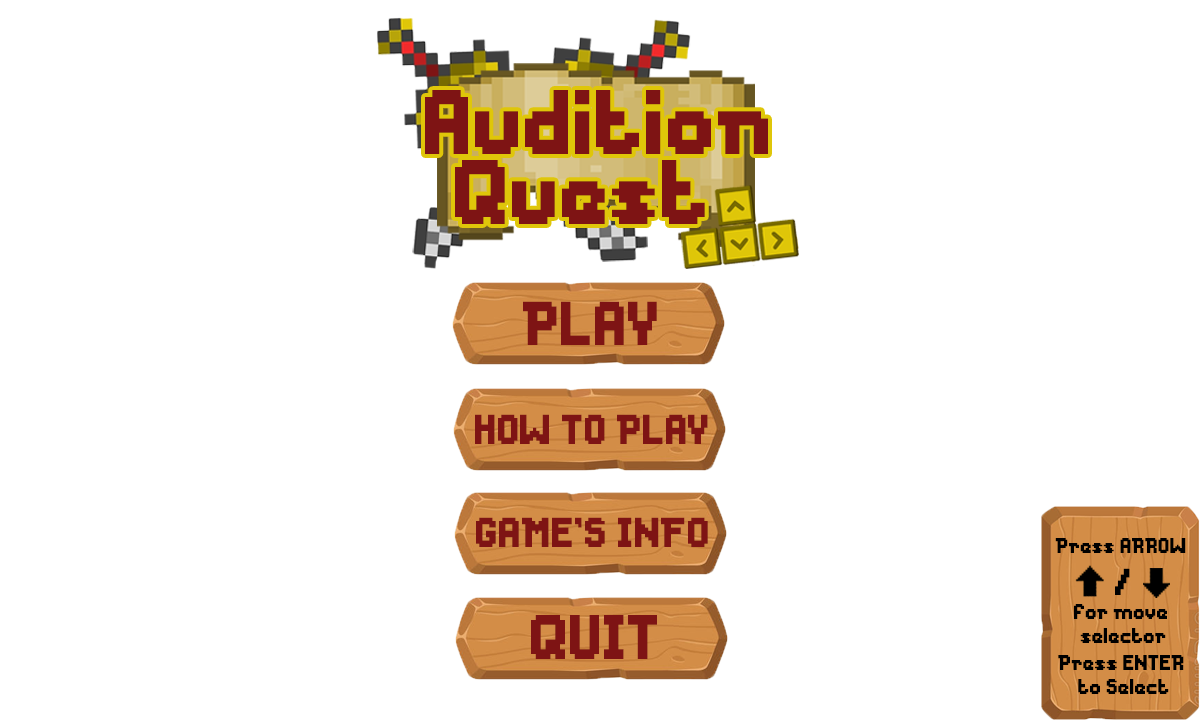
<style>
.page{position:relative;width:1200px;height:720px;background:#ffffff}
.page>*{position:absolute;margin:0}
.t1{font:85.4px "Messe-Duesseldorf";color:#7e1414}
.t2{font:57.8px "Messe-Duesseldorf";color:#7e1414}
.t3{font:39.1px "Messe-Duesseldorf";color:#7e1414}
.t4{font:20px "Messe-Duesseldorf";color:#000000}
.t5{font:34.9px "Messe-Duesseldorf";color:#000000}
.t6{font:58.7px "Messe-Duesseldorf";color:#7e1414}
</style>
<div class="page">
<p class="t1" style="left:425px;top:90px;width:343px;height:64px">Audition</p>
<p class="t1" style="left:455px;top:160px;width:250px;height:64px">Quest</p>
<p class="t2" style="left:523px;top:301px;width:134px;height:44px">PLAY</p>
<p class="t3" style="left:475px;top:414px;width:233px;height:30px">HOW TO PLAY</p>
<p class="t3" style="left:476px;top:517px;width:232px;height:30px">GAME’S INFO</p>
<p class="t4" style="left:1055px;top:538px;width:131px;height:105px;text-align:center">Press ARROW <br><span class="t5">/<br></span>for move <br>selector</p>
<p class="t6" style="left:531px;top:615px;width:126px;height:44px">QUIT</p>
<p class="t4" style="left:1058px;top:655px;width:126px;height:39px;text-align:center">Press ENTER <br>to Select</p>
</div>
